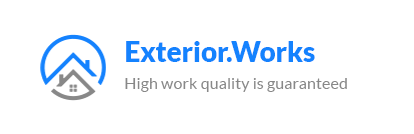
<style>
.page{position:relative;width:414px;height:134px;background:#ffffff}
.page>*{position:absolute;margin:0}
.t1{font:16.2px/26.5px "Lato-Regular";color:#888888}
.t2{font:27.6px/26.5px "Lato-Black";color:#1482fe}
</style>
<div class="page">
<p class="t1" style="left:125px;top:41px;width:222px;height:51px"><span class="t2">Exterior.Works<br></span>High work quality is guaranteed</p>
</div>
